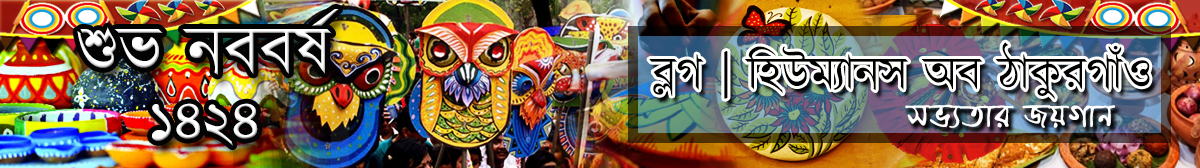
<style>
.page{position:relative;width:1200px;height:168px}
.page>*{position:absolute;margin:0}
.t1{font:69.4px "Kalpurush";color:#ffffff}
.t2{font:55.6px "Kalpurush";color:#ffffff}
.t3{font:47.2px "Kalpurush";color:#000000}
.t4{font:41.7px "EkusheyPuja";color:#ffffff}
</style>
<div class="page">
<p class="t1" style="left:77px;top:9px;width:262px;height:137px;text-align:center">শুভ নববর্ষ<br><span class="t2">১৪২৪</span></p>
<p class="t3" style="left:649px;top:42px;width:501px;height:58px">ব্লগ | হিউম্যানস অব ঠাকুরগাঁও</p>
<p class="t4" style="left:905px;top:104px;width:210px;height:24px">সভ্যতার জয়গান</p>
</div>
